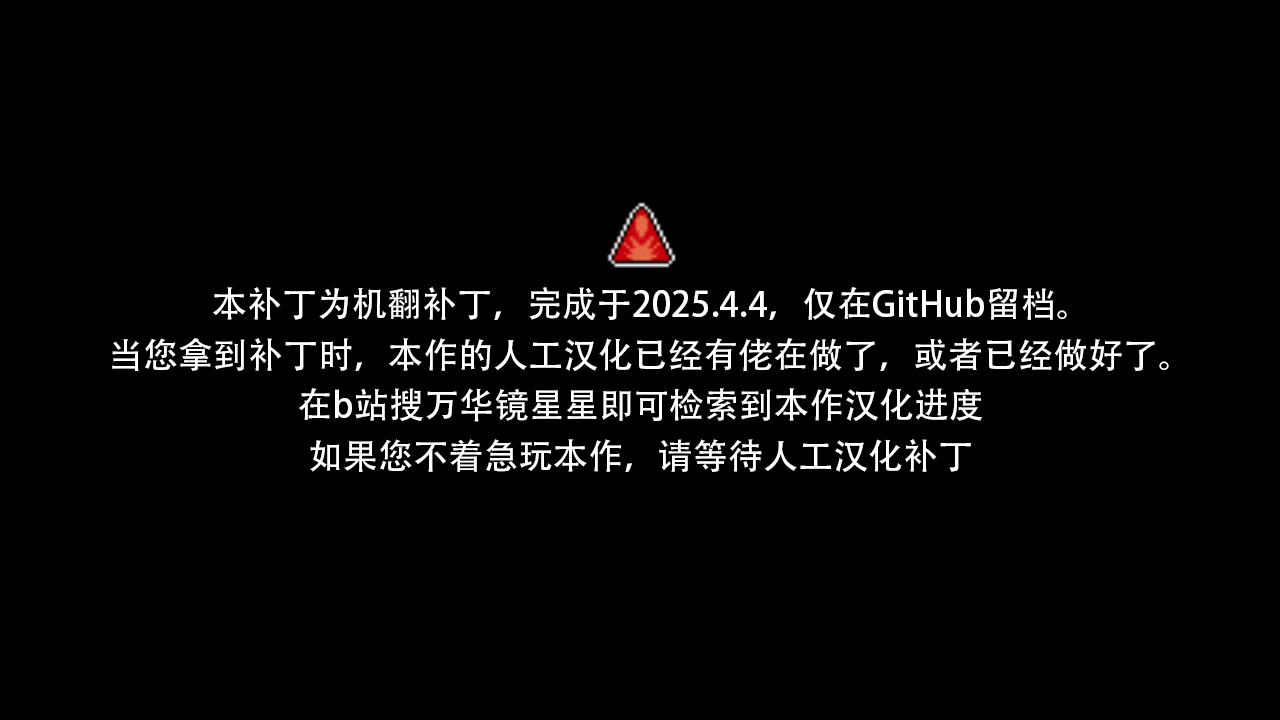
<style>
.page{position:relative;width:1280px;height:720px;background:#000000}
.page>*{position:absolute;margin:0}
.t1{font:35px "AdobeHeitiStd-Regular";color:#ffffff}
</style>
<div class="page">
<p class="t1" style="left:213px;top:287px;width:854px;height:33px">本补丁为机翻补丁，完成于2025.4.4，仅在GitHub留档。</p>
<p class="t1" style="left:112px;top:338px;width:1057px;height:34px">当您拿到补丁时，本作的人工汉化已经有佬在做了，或者已经做好了。</p>
<p class="t1" style="left:299px;top:388px;width:683px;height:34px">在b站搜万华镜星星即可检索到本作汉化进度</p>
<p class="t1" style="left:310px;top:439px;width:661px;height:33px">如果您不着急玩本作，请等待人工汉化补丁</p>
</div>
